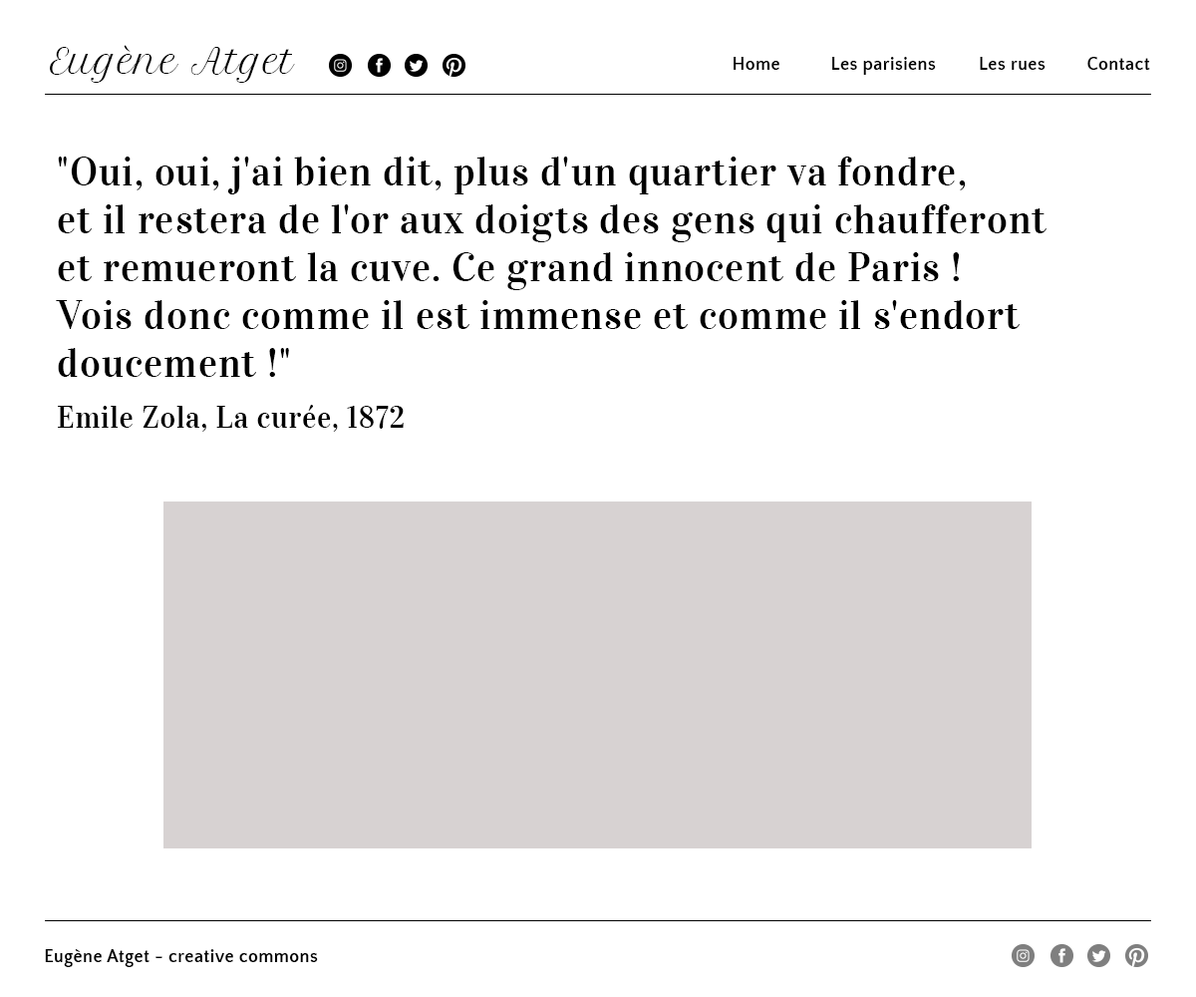
<style>
.page{position:relative;width:1196px;height:997px;background:#ffffff}
.page>*{position:absolute;margin:0}
.t1{font:33.5px "PetitFormalScript-Regular";letter-spacing:0.025em;color:#000000}
.t2{font:17.9px "QuattrocentoSans-Bold";letter-spacing:0.025em;color:#000000}
.t3{font:39.9px "Vidaloka-Regular";letter-spacing:0.025em;color:#000000}
.t4{font:29.9px "Vidaloka-Regular";letter-spacing:0.025em;color:#000000}
</style>
<div class="page">
<p class="t1" style="left:50px;top:45px;width:245px;height:38px">Eugène Atget</p>
<p class="t2" style="left:734px;top:57px;width:46px;height:13px">Home</p>
<p class="t2" style="left:832px;top:57px;width:104px;height:18px">Les parisiens</p>
<p class="t2" style="left:980px;top:57px;width:66px;height:13px">Les rues</p>
<p class="t2" style="left:1088px;top:57px;width:62px;height:13px">Contact</p>
<p class="t3" style="left:56px;top:157px;width:991px;height:220px">"Oui, oui, j'ai bien dit, plus d'un quartier va fondre,<br>et il restera de l'or aux doigts des gens qui chaufferont <br>et remueront la cuve. Ce grand innocent de Paris ! <br>Vois donc comme il est immense et comme il s'endort <br>doucement !"</p>
<p class="t4" style="left:58px;top:405px;width:346px;height:27px">Emile Zola, La curée, 1872</p>
<p class="t2" style="left:45px;top:949px;width:273px;height:18px">Eugène Atget - creative commons</p>
</div>
